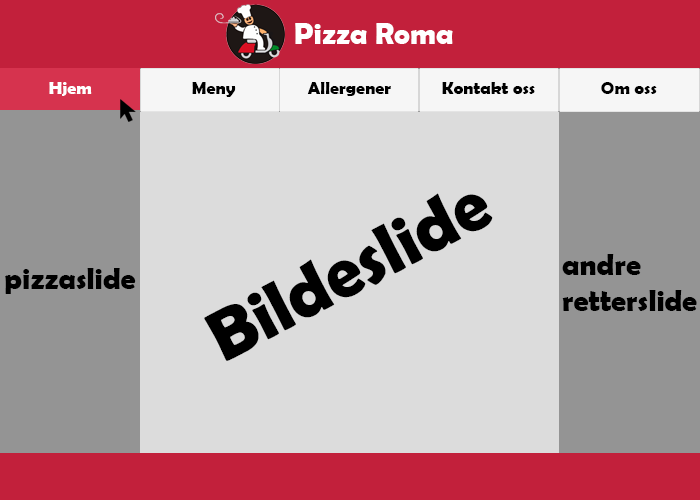
<style>
.page{position:relative;width:700px;height:500px;background:#dcdcdc}
.page>*{position:absolute;margin:0}
.t1{font:30px "BerlinSansFBDemi-Bold";color:#ffffff}
.t2{font:18px "BerlinSansFBDemi-Bold";color:#ffffff}
.t3{font:18px "BerlinSansFBDemi-Bold";color:#000000}
.t4{font:72px "BerlinSansFBDemi-Bold";color:#000000}
.t5{font:30px "BerlinSansFBDemi-Bold";color:#000000}
</style>
<div class="page">
<p class="t1" style="left:295px;top:23px;width:158px;height:21px">Pizza Roma</p>
<p class="t2" style="left:49px;top:82px;width:43px;height:14px">Hjem</p>
<p class="t3" style="left:192px;top:82px;width:44px;height:15px">Meny</p>
<p class="t3" style="left:307px;top:82px;width:84px;height:14px">Allergener</p>
<p class="t3" style="left:442px;top:82px;width:93px;height:12px">Kontakt oss</p>
<p class="t3" style="left:601px;top:82px;width:56px;height:12px">Om oss</p>
<p class="t4" style="left:204px;top:193px;width:289px;height:168px;rotate:-28deg">Bildeslide</p>
<p class="t5" style="left:562px;top:254px;width:135px;height:57px">andre<br>retterslide</p>
<p class="t5" style="left:5px;top:268px;width:131px;height:26px">pizzaslide</p>
</div>
